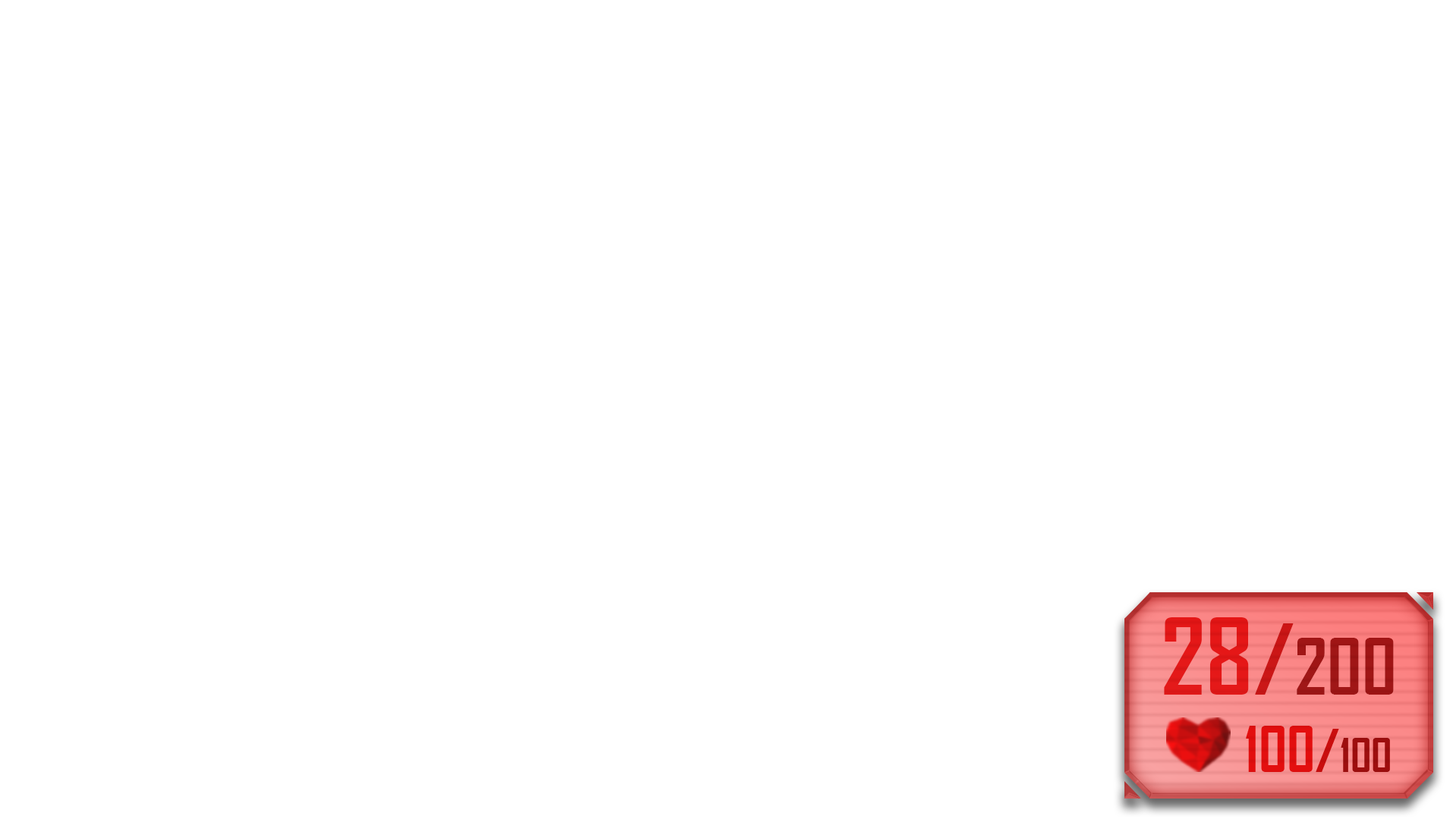
<style>
.page{position:relative;width:1456px;height:819px;background:#ffffff}
.page>*{position:absolute;margin:0}
.t1{font:74.6px "AgencyFB-Bold";color:#960000}
.t2{font:101.4px "AgencyFB-Bold";color:#e60000}
.t3{font:93.3px "AgencyFB-Bold";color:#c80000}
.t4{font:60.8px "AgencyFB-Bold";color:#e60000}
.t5{font:56px "AgencyFB-Bold";color:#c80000}
.t6{font:44.8px "AgencyFB-Bold";color:#960000}
</style>
<div class="page">
<p class="t1" style="left:1164px;top:617px;width:229px;height:78px;opacity:0.9"><span class="t2">28</span><span class="t3">/</span>200</p>
<p class="t4" style="left:1245px;top:726px;width:145px;height:46px">100<span class="t5">/</span><span class="t6">100</span></p>
</div>
